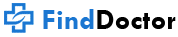
<style>
.page{position:relative;width:178px;height:37px;background:#ffffff}
.page>*{position:absolute;margin:0}
.t1{font:30px "TwCenMT-Bold";color:#010101}
.t2{font:30px "TwCenMT-Bold";color:#1a76d1}
</style>
<div class="page">
<p class="t1" style="left:43px;top:9px;width:133px;height:20px"><span class="t2">Find</span>Doctor</p>
</div>
